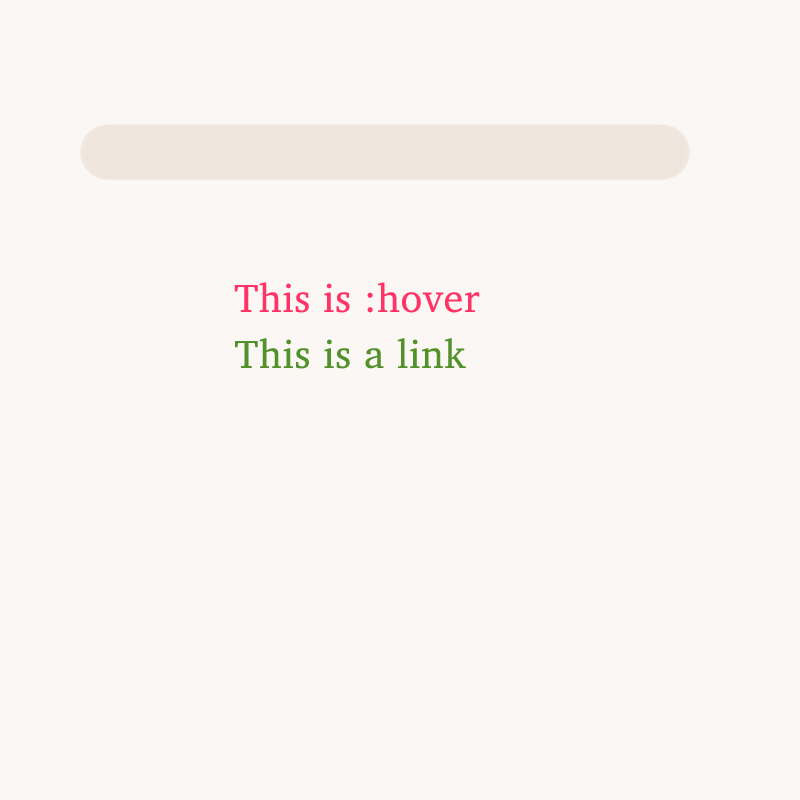
<style>
.page{position:relative;width:800px;height:800px;background:#faf7f4}
.page>*{position:absolute;margin:0}
.t1{font:40px "Charter-Roman";letter-spacing:0.02em;color:#ff3366}
.t2{font:40px "Charter-Roman";letter-spacing:0.02em;color:#53912a}
</style>
<div class="page">
<p class="t1" style="left:234px;top:282px;width:246px;height:31px">This is :hover</p>
<p class="t2" style="left:235px;top:338px;width:231px;height:31px">This is a link</p>
</div>
